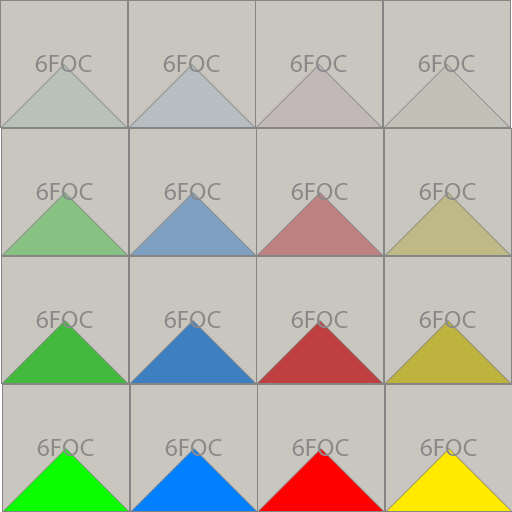
<style>
.page{position:relative;width:512px;height:512px;background:#c8c6bf}
.page>*{position:absolute;margin:0}
.t1{font:25px "MyriadPro-Regular";color:#898989}
</style>
<div class="page">
<p class="t1" style="left:35px;top:55px;width:57px;height:17px">6FOC</p>
<p class="t1" style="left:163px;top:55px;width:57px;height:17px">6FOC</p>
<p class="t1" style="left:290px;top:55px;width:57px;height:17px">6FOC</p>
<p class="t1" style="left:418px;top:55px;width:57px;height:17px">6FOC</p>
<p class="t1" style="left:36px;top:183px;width:57px;height:17px">6FOC</p>
<p class="t1" style="left:164px;top:183px;width:57px;height:17px">6FOC</p>
<p class="t1" style="left:291px;top:183px;width:57px;height:17px">6FOC</p>
<p class="t1" style="left:419px;top:183px;width:57px;height:17px">6FOC</p>
<p class="t1" style="left:36px;top:311px;width:57px;height:17px">6FOC</p>
<p class="t1" style="left:164px;top:311px;width:57px;height:17px">6FOC</p>
<p class="t1" style="left:291px;top:311px;width:57px;height:17px">6FOC</p>
<p class="t1" style="left:419px;top:311px;width:57px;height:17px">6FOC</p>
<p class="t1" style="left:37px;top:439px;width:57px;height:17px">6FOC</p>
<p class="t1" style="left:165px;top:439px;width:57px;height:17px">6FOC</p>
<p class="t1" style="left:292px;top:439px;width:57px;height:17px">6FOC</p>
<p class="t1" style="left:420px;top:439px;width:57px;height:17px">6FOC</p>
</div>
